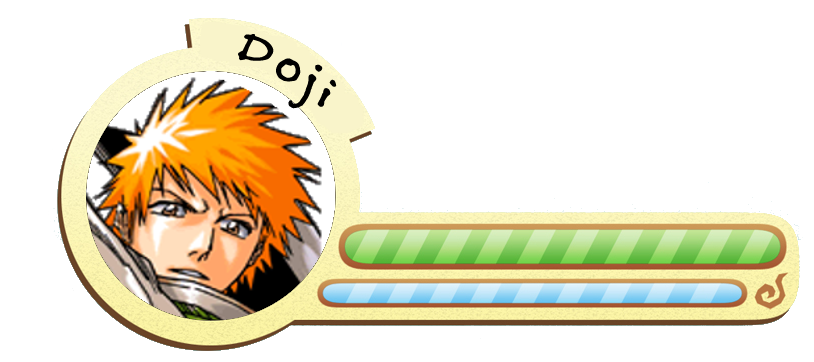
<style>
.page{position:relative;width:814px;height:362px;background:#ffffff}
.page>*{position:absolute;margin:0}
.t1{font:40.7px "BuxtonSketch";letter-spacing:0.1em;color:#000000;scale:1.46 1}
</style>
<div class="page">
<p class="t1" style="left:238px;top:34px;width:99px;height:75px;rotate:32deg">Doji</p>
</div>
